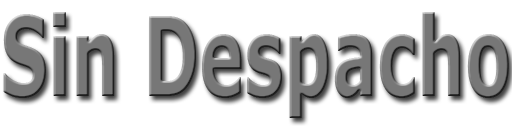
<style>
.page{position:relative;width:512px;height:128px;background:#ffffff}
.page>*{position:absolute;margin:0}
.t1{font:109.7px "Verdana-Bold";color:#777777;scale:0.62 1}
</style>
<div class="page">
<p class="t1" style="left:3px;top:12px;width:506px;height:106px">Sin Despacho</p>
</div>
